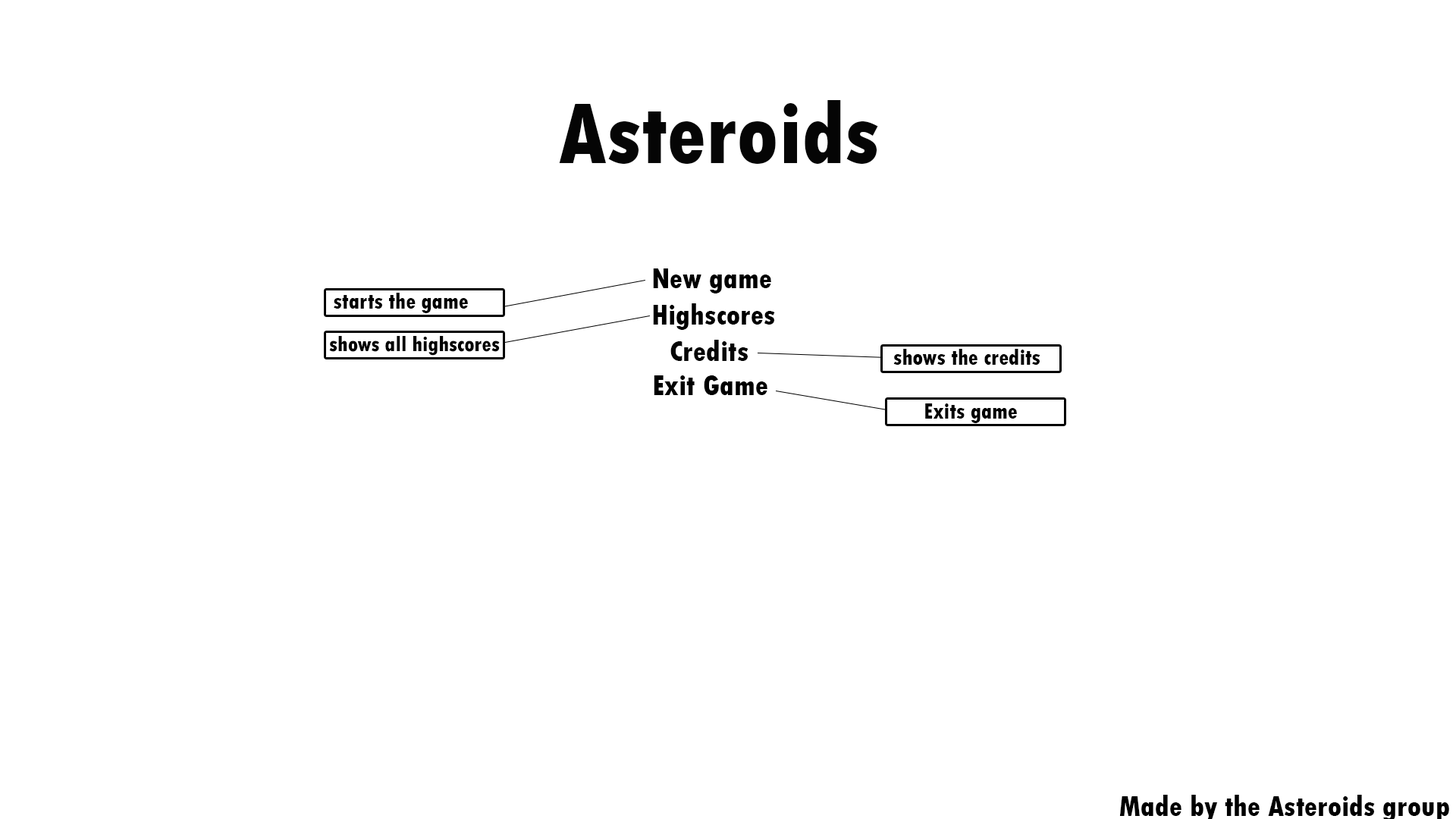
<style>
.page{position:relative;width:1456px;height:819px;background:#ffffff}
.page>*{position:absolute;margin:0}
.t1{font:91px "TwCenMT-CondensedExtraBold";color:#000000}
.t2{font:30.3px "TwCenMT-CondensedExtraBold";color:#000000}
.t3{font:22.7px "TwCenMT-CondensedExtraBold";color:#000000}
.t4{font:22px "TwCenMT-CondensedExtraBold";color:#000000}
</style>
<div class="page">
<p class="t1" style="left:559px;top:100px;width:319px;height:64px">Asteroids</p>
<p class="t2" style="left:653px;top:268px;width:118px;height:25px">New game</p>
<p class="t3" style="left:334px;top:293px;width:134px;height:20px">starts the game</p>
<p class="t2" style="left:653px;top:303px;width:122px;height:27px">Highscores</p>
<p class="t4" style="left:329px;top:336px;width:171px;height:20px">shows all highscores</p>
<p class="t2" style="left:670px;top:340px;width:78px;height:21px">Credits</p>
<p class="t3" style="left:893px;top:349px;width:147px;height:16px">shows the credits</p>
<p class="t2" style="left:654px;top:375px;width:113px;height:20px">Exit Game</p>
<p class="t3" style="left:925px;top:403px;width:92px;height:20px">Exits game</p>
</div>
